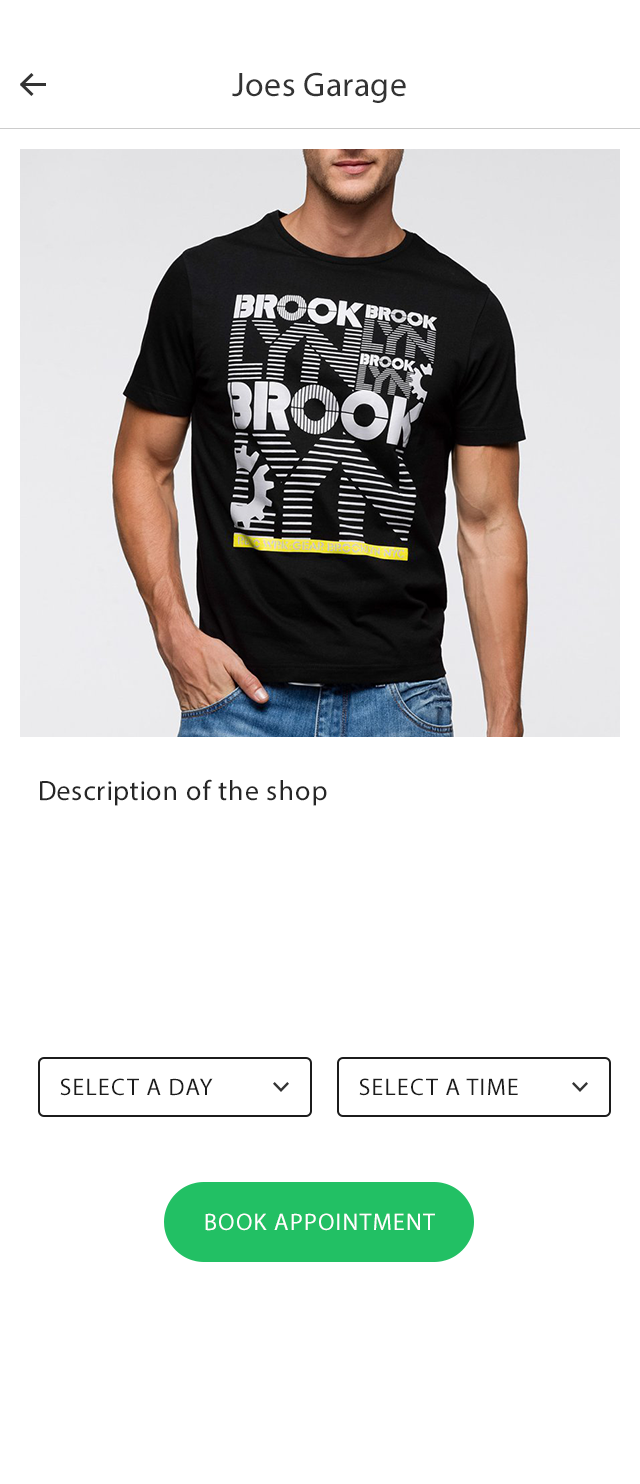
<style>
.page{position:relative;width:640px;height:1484px;background:#ffffff}
.page>*{position:absolute;margin:0}
.t1{font:34px "MyriadPro-Regular";letter-spacing:0.01em;color:#333333}
.t2{font:28px "MyriadPro-Regular";letter-spacing:0.025em;color:#262626}
.t3{font:24px "MyriadPro-Regular";letter-spacing:0.05em;color:#1c1c1c;text-transform:uppercase}
.t4{font:24px "MyriadPro-Regular";letter-spacing:0.05em;color:#ffffff;text-transform:uppercase}
</style>
<div class="page">
<p class="t1" style="left:232px;top:72px;width:174px;height:31px">Joes Garage</p>
<p class="t2" style="left:40px;top:779px;width:287px;height:27px">Description of the shop</p>
<p class="t3" style="left:60px;top:1078px;width:153px;height:18px">SELECT A DAY</p>
<p class="t3" style="left:359px;top:1078px;width:159px;height:18px">SELECT A TIME</p>
<p class="t4" style="left:205px;top:1213px;width:230px;height:18px">BOOK APPOINTMENT</p>
</div>
